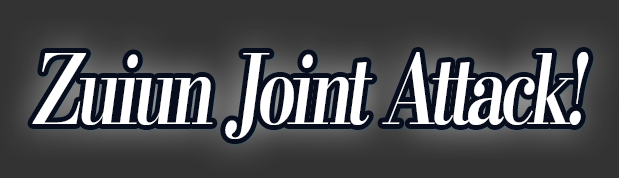
<style>
.page{position:relative;width:619px;height:178px;background:#333333}
.page>*{position:absolute;margin:0}
.t1{font:96px "KochoStd-Heavy";letter-spacing:-0.08em;color:#ffffff;font-style:italic;scale:0.75 1}
</style>
<div class="page">
<p class="t1" style="left:32px;top:52px;width:557px;height:87px">Zuiun Joint Attack!</p>
</div>
